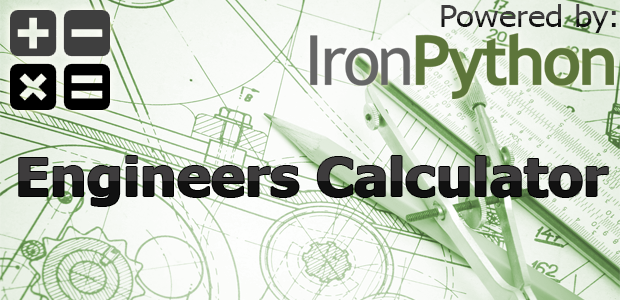
<style>
.page{position:relative;width:620px;height:300px}
.page>*{position:absolute;margin:0}
.t1{font:30px "Tahoma";scale:1.1 1}
.t2{font:52px "Tahoma-Bold";scale:1.1 1}
</style>
<div class="page">
<p class="t1" style="left:441px;top:4px;width:175px;height:29px">Powered by:</p>
<p class="t2" style="left:19px;top:156px;width:589px;height:50px">Engineers Calculator</p>
</div>
